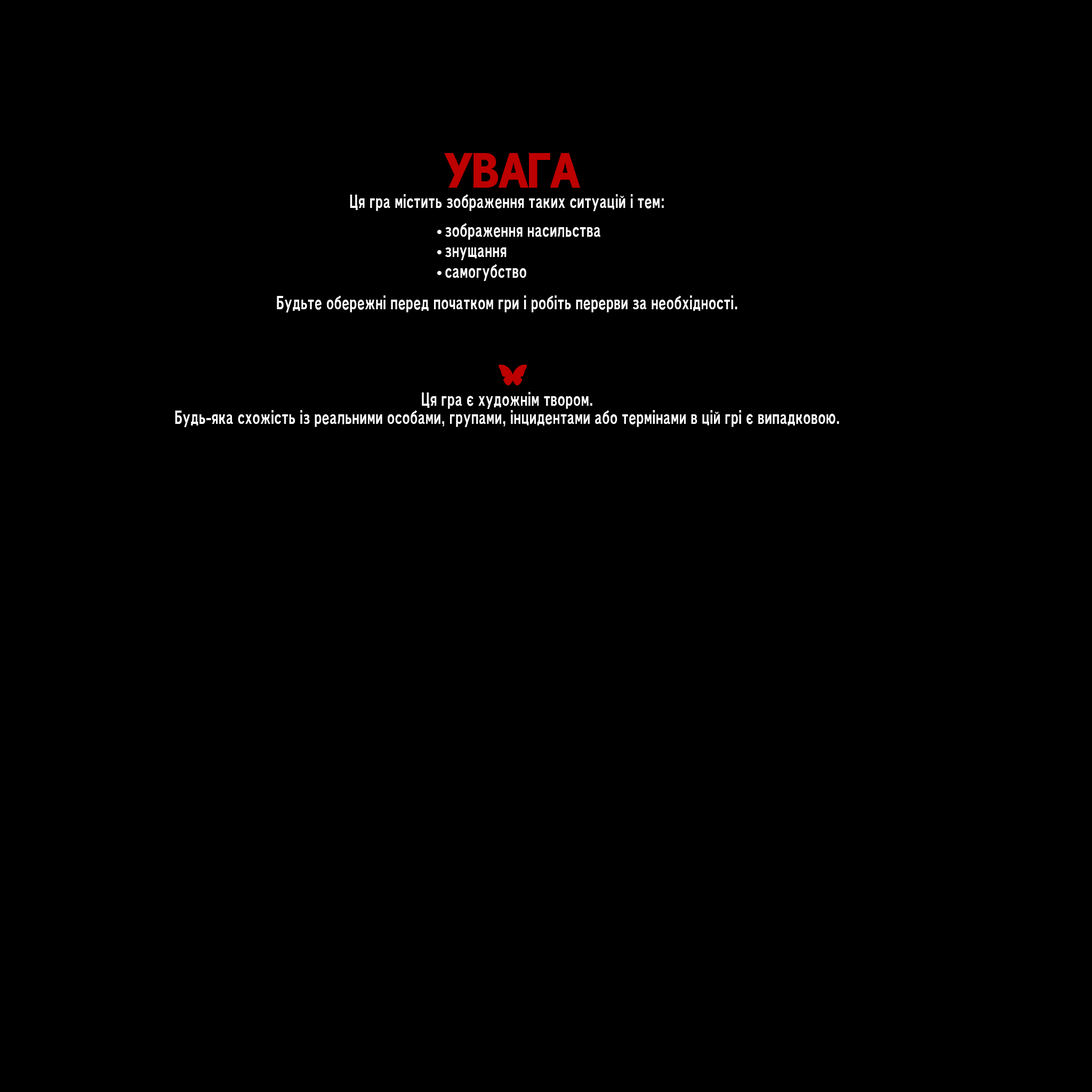
<style>
.page{position:relative;width:1092px;height:1092px;background:#000000}
.page>*{position:absolute;margin:0}
.t1{font:44px "RodinPro-EB";letter-spacing:-0.1em;color:#bd0000}
.t2{font:17px "RodinPro-B";color:#ffffff;scale:0.69 1}
</style>
<div class="page">
<p class="t1" style="left:444px;top:153px;width:136px;height:35px">УВАГА</p>
<p class="t2" style="left:350px;top:194px;width:314px;height:17px">Ця гра містить зображення таких ситуацій і тем:</p>
<p class="t2" style="left:445px;top:223px;width:155px;height:58px">зображення насильства<br>знущання<br>самогубство</p>
<p class="t2" style="left:277px;top:295px;width:460px;height:17px">Будьте обережні перед початком гри і робіть перерви за необхідності.</p>
<p class="t2" style="left:422px;top:392px;width:170px;height:17px">Ця гра є художнім твором.</p>
<p class="t2" style="left:175px;top:410px;width:664px;height:17px">Будь-яка схожість із реальними особами, групами, інцидентами або термінами в цій грі є випадковою.</p>
</div>
